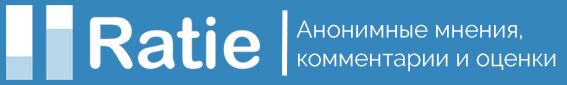
<style>
.page{position:relative;width:567px;height:85px;background:#3686be}
.page>*{position:absolute;margin:0}
.t1{font:24px "Raleway-Regular";color:#ffffff}
</style>
<div class="page">
<p class="t1" style="left:296px;top:20px;width:260px;height:52px">Анонимные мнения,<br>комментарии и оценки</p>
</div>
